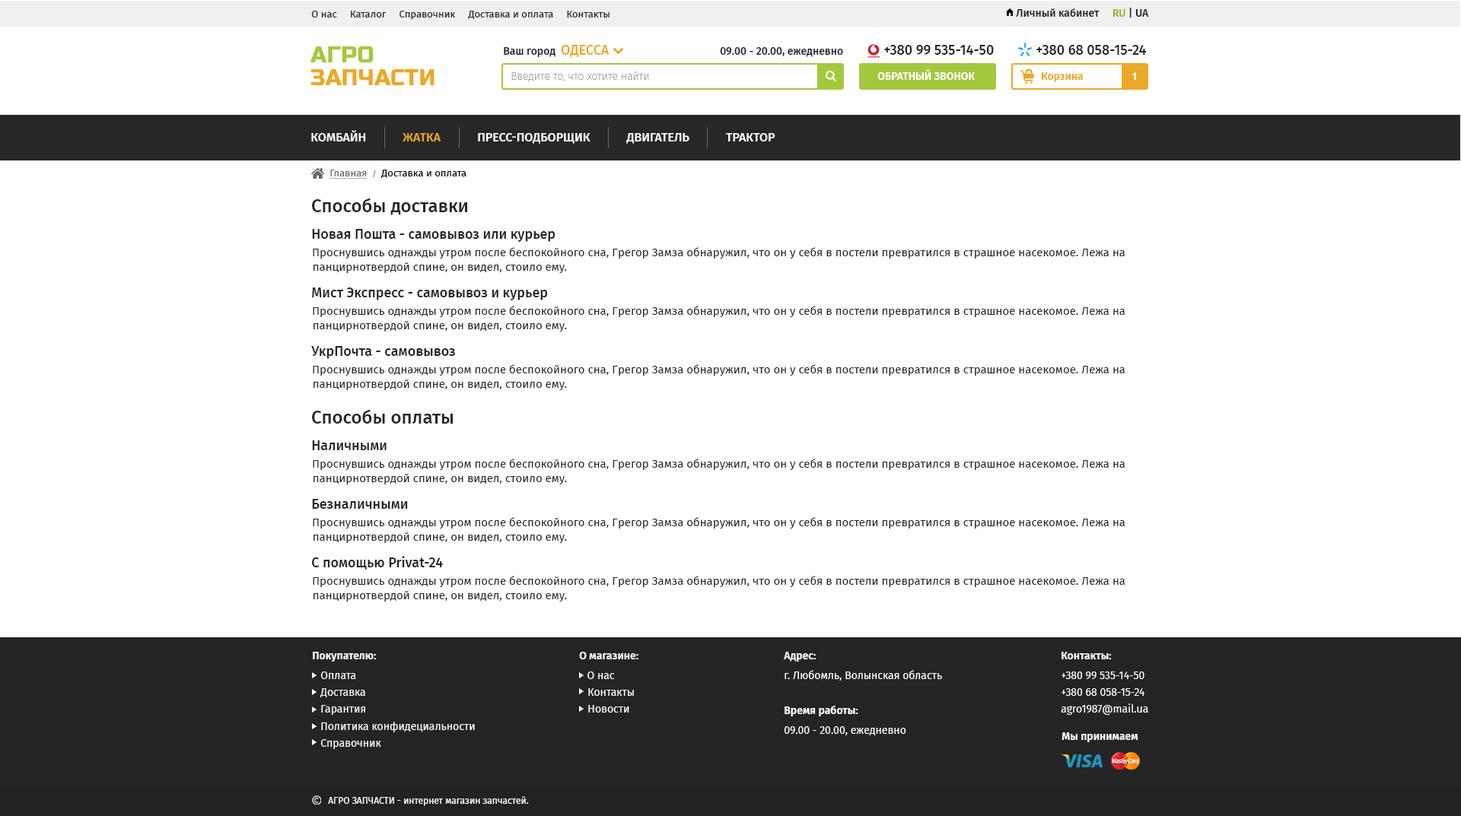
<style>
.page{position:relative;width:1461px;height:816px;background:#ffffff}
.page>*{position:absolute;margin:0}
.t1{font:9.9px "FiraSans-Regular";color:#212121}
.t2{font:10.7px "FiraSans-Medium";color:#212121}
.t3{font:10.7px "FiraSans-Medium";color:#91b627}
.t4{font:22.8px/22.8px "RussoOne-Regular";color:#eaa926;text-transform:uppercase}
.t5{font:22.8px/22.8px "RussoOne-Regular";color:#a4c83d;text-transform:uppercase}
.t6{font:10.7px "FiraSans-Medium";color:#272727}
.t7{font:13.7px "FiraSans-Medium";color:#eaa926}
.t8{font:13.7px "FiraSans-Medium";color:#272727}
.t9{font:10.7px "FiraSans-Thin";color:#777777}
.t10{font:10.7px "FiraSans-SemiBold";color:#ffffff;text-transform:uppercase}
.t11{font:10.7px "FiraSans-SemiBold";color:#eaa926}
.t12{font:10.7px "HelveticaNeueCyr-Bold";color:#ffffff}
.t13{font:12.2px "FiraSans-Medium";color:#ffffff;text-transform:uppercase}
.t14{font:12.2px "FiraSans-Medium";color:#eaa926;text-transform:uppercase}
.t15{font:9.9px "FiraSans-Regular";color:#000000}
.t16{font:9.9px "FiraSans-Regular";color:#676767;text-decoration:underline}
.t17{font:7.6px "FiraSans-Regular";color:#676767}
.t18{font:18.3px "FiraSans-Medium";color:#272727}
.t19{font:11.4px/14.5px "FiraSans-Regular";color:#272727}
.t20{font:10.7px/16.7px "FiraSans-Regular";color:#ffffff}
.t21{font:10.7px/19.8px "FiraSans-SemiBold";color:#ffffff}
.t22{font:10.7px/19.8px "FiraSans-Regular";color:#ffffff}
.t23{font:10.7px "FiraSans-SemiBold";color:#ffffff}
.t24{font:9.1px "FiraSans-Regular";color:#ffffff}
</style>
<div class="page">
<p class="t1" style="left:311px;top:11px;width:298px;height:9px">О нас     Каталог     Справочник     Доставка и оплата     Контакты</p>
<p class="t2" style="left:1016px;top:8px;width:133px;height:9px">Личный кабинет     <span class="t3">RU</span> | UA</p>
<p class="t4" style="left:310px;top:46px;width:124px;height:40px"><span class="t5">АГРО<br></span>ЗАПЧАСТИ</p>
<p class="t6" style="left:504px;top:45px;width:105px;height:12px">Ваш город  <span class="t7">ОДЕССА</span></p>
<p class="t6" style="left:720px;top:47px;width:123px;height:10px">09.00 - 20.00, ежедневно</p>
<p class="t8" style="left:884px;top:45px;width:110px;height:10px">+380 99 535-14-50</p>
<p class="t8" style="left:1036px;top:45px;width:110px;height:10px">+380 68 058-15-24</p>
<p class="t9" style="left:511px;top:72px;width:138px;height:9px">Введите то, что хотите найти</p>
<p class="t10" style="left:877px;top:69px;width:98px;height:11px">Обратный звонок</p>
<p class="t11" style="left:1041px;top:72px;width:42px;height:10px">Корзина</p>
<p class="t12" style="left:1132px;top:72px;width:4px;height:9px">1</p>
<p class="t13" style="left:311px;top:130px;width:464px;height:14px">КОМБАЙН            <span class="t14">ЖАТКА            </span>ПРЕСС-ПОДБОРЩИК            ДВИГАТЕЛЬ            трактор</p>
<p class="t15" style="left:329px;top:170px;width:137px;height:10px"><span class="t16">Главная  </span><span class="t17">/</span>  Доставка и оплата</p>
<p class="t18" style="left:312px;top:198px;width:155px;height:17px">Способы доставки</p>
<p class="t8" style="left:312px;top:229px;width:243px;height:13px">Новая Пошта - самовывоз или курьер</p>
<p class="t19" style="left:313px;top:247px;width:812px;height:26px">Проснувшись однажды утром после беспокойного сна, Грегор Замза обнаружил, что он у себя в постели превратился в страшное насекомое. Лежа на панцирнотвердой спине, он видел, стоило ему.</p>
<p class="t8" style="left:312px;top:288px;width:236px;height:13px">Мист Экспресс - самовывоз и курьер</p>
<p class="t19" style="left:313px;top:306px;width:812px;height:26px">Проснувшись однажды утром после беспокойного сна, Грегор Замза обнаружил, что он у себя в постели превратился в страшное насекомое. Лежа на панцирнотвердой спине, он видел, стоило ему.</p>
<p class="t8" style="left:311px;top:346px;width:144px;height:13px">УкрПочта - самовывоз</p>
<p class="t19" style="left:313px;top:364px;width:812px;height:26px">Проснувшись однажды утром после беспокойного сна, Грегор Замза обнаружил, что он у себя в постели превратился в страшное насекомое. Лежа на панцирнотвердой спине, он видел, стоило ему.</p>
<p class="t18" style="left:312px;top:409px;width:141px;height:16px">Способы оплаты</p>
<p class="t8" style="left:312px;top:440px;width:74px;height:10px">Наличными</p>
<p class="t19" style="left:313px;top:459px;width:812px;height:26px">Проснувшись однажды утром после беспокойного сна, Грегор Замза обнаружил, что он у себя в постели превратился в страшное насекомое. Лежа на панцирнотвердой спине, он видел, стоило ему.</p>
<p class="t8" style="left:312px;top:499px;width:96px;height:10px">Безналичными</p>
<p class="t19" style="left:313px;top:517px;width:812px;height:26px">Проснувшись однажды утром после беспокойного сна, Грегор Замза обнаружил, что он у себя в постели превратился в страшное насекомое. Лежа на панцирнотвердой спине, он видел, стоило ему.</p>
<p class="t8" style="left:312px;top:556px;width:131px;height:14px">С помощью Privat-24</p>
<p class="t19" style="left:313px;top:576px;width:812px;height:26px">Проснувшись однажды утром после беспокойного сна, Грегор Замза обнаружил, что он у себя в постели превратился в страшное насекомое. Лежа на панцирнотвердой спине, он видел, стоило ему.</p>
<p class="t20" style="left:313px;top:652px;width:162px;height:97px"><span class="t21">Покупателю:<br></span><span class="t22">   Оплата<br></span>   Доставка<br>   Гарантия<br>   Политика конфидециальности<br>   Справочник</p>
<p class="t20" style="left:579px;top:652px;width:59px;height:61px"><span class="t21">О магазине:<br>   </span><span class="t22">О нас<br></span>   Контакты<br>   Новости</p>
<p class="t22" style="left:784px;top:652px;width:158px;height:29px"><span class="t21">Адрес:<br></span>г. Любомль, Волынская область</p>
<p class="t20" style="left:1061px;top:652px;width:87px;height:63px"><span class="t21">Контакты:<br></span><span class="t22">+380 99 535-14-50<br></span>+380 68 058-15-24<br>agro1987@mail.ua</p>
<p class="t22" style="left:784px;top:705px;width:122px;height:31px"><span class="t21">Время работы:<br></span>09.00 - 20.00, ежедневно</p>
<p class="t23" style="left:1061px;top:733px;width:77px;height:10px">Мы принимаем</p>
<p class="t24" style="left:328px;top:797px;width:201px;height:9px">АГРО ЗАПЧАСТИ - интернет магазин запчастей.</p>
</div>
